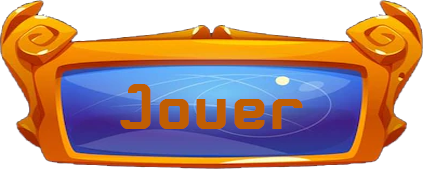
<style>
.page{position:relative;width:423px;height:169px;background:#ffffff}
.page>*{position:absolute;margin:0}
.t1{font:72px "AliveinaScienceFiction";color:#c05e03}
</style>
<div class="page">
<p class="t1" style="left:120px;top:84px;width:183px;height:45px">Jouer</p>
</div>
